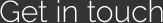
<style>
.page{position:relative;width:163px;height:23px;background:#333333}
.page>*{position:absolute;margin:0}
.t1{font:30px "Raleway-Light";color:#ffffff}
</style>
<div class="page">
<p class="t1" style="left:0px;top:0px;width:163px;height:23px">Get in touch</p>
</div>
